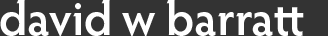
<style>
.page{position:relative;width:328px;height:36px;background:#333333}
.page>*{position:absolute;margin:0}
.t1{font:48px "HypatiaSansPro-Semibold";color:#ffffff}
</style>
<div class="page">
<p class="t1" style="left:0px;top:0px;width:304px;height:36px">david w barratt</p>
</div>
